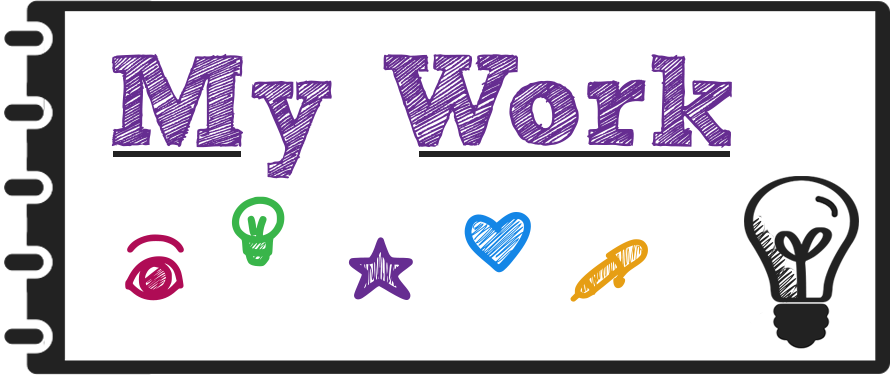
<style>
.page{position:relative;width:893px;height:381px;background:#ffffff}
.page>*{position:absolute;margin:0}
.t1{font:129px "SketchRockwell";color:#662d91}
</style>
<div class="page">
<p class="t1" style="left:111px;top:53px;width:621px;height:126px">My Work</p>
</div>
